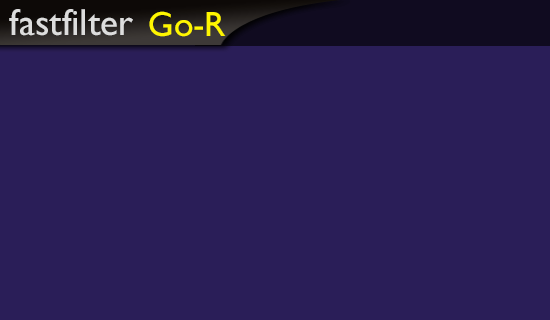
<style>
.page{position:relative;width:550px;height:320px;background:#2a1e58}
.page>*{position:absolute;margin:0}
.t1{font:37.7px "GillSansMT";color:#dddddd}
.t2{font:35.1px "GillSansMT";color:#fff600}
</style>
<div class="page">
<p class="t1" style="left:9px;top:9px;width:124px;height:27px">fastfilter</p>
<p class="t2" style="left:149px;top:11px;width:77px;height:26px">Go-R</p>
</div>
